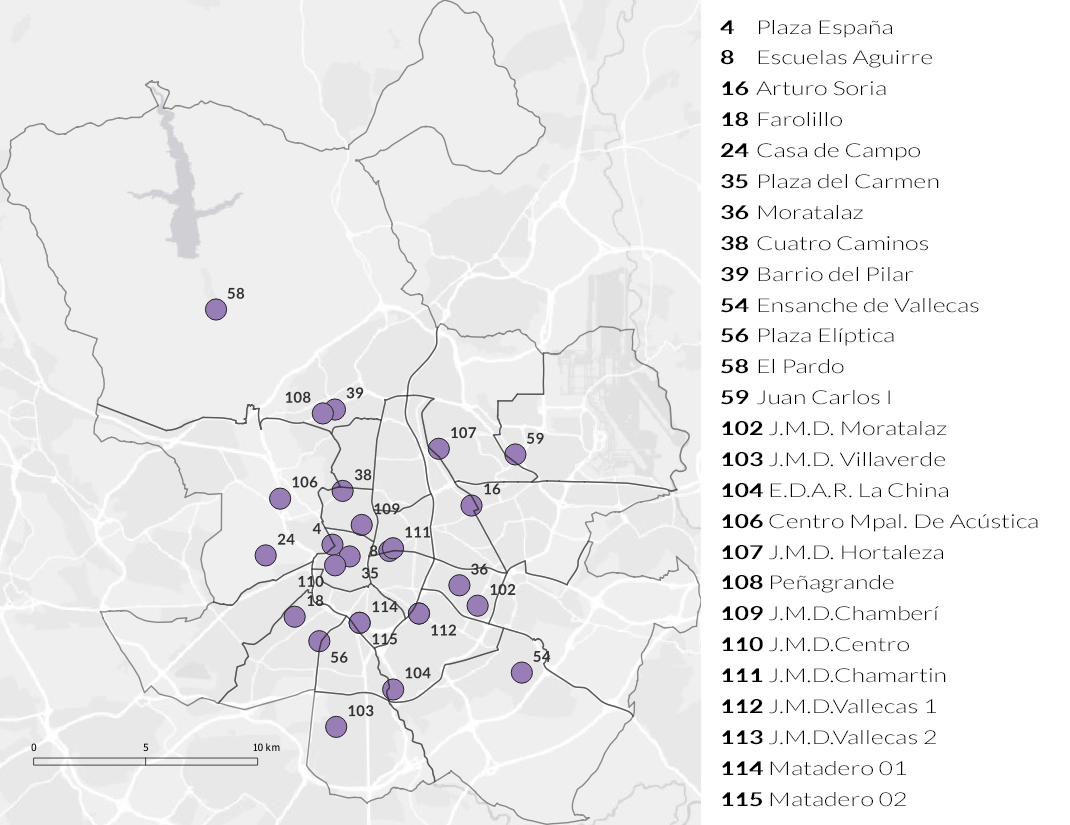
<style>
.page{position:relative;width:1070px;height:825px;background:#ffffff}
.page>*{position:absolute;margin:0}
.t1{font:19.3px/30.9px "Lato-Light";color:#000000;scale:1.29 1}
.t2{font:19.3px/30.9px "Lato-Bold";color:#000000;scale:1.29 1}
</style>
<div class="page">
<p class="t1" style="left:720px;top:20px;width:318px;height:787px"><span class="t2">4</span> Plaza España<br><span class="t2">8</span> Escuelas Aguirre<br><span class="t2">16</span> Arturo Soria<br><span class="t2">18</span> Farolillo<br><span class="t2">24</span> Casa de Campo<br><span class="t2">35</span> Plaza del Carmen<br><span class="t2">36</span> Moratalaz<br><span class="t2">38</span> Cuatro Caminos<br><span class="t2">39</span> Barrio del Pilar<br><span class="t2">54</span> Ensanche de Vallecas<br><span class="t2">56</span> Plaza Elíptica<br><span class="t2">58</span> El Pardo<br><span class="t2">59</span> Juan Carlos I<br><span class="t2">102</span> J.M.D. Moratalaz<br><span class="t2">103</span> J.M.D. Villaverde<br><span class="t2">104</span> E.D.A.R. La China<br><span class="t2">106</span> Centro Mpal. De Acústica<br><span class="t2">107</span> J.M.D. Hortaleza<br><span class="t2">108</span> Peñagrande<br><span class="t2">109</span> J.M.D.Chamberí<br><span class="t2">110</span> J.M.D.Centro<br><span class="t2">111</span> J.M.D.Chamartin<br><span class="t2">112</span> J.M.D.Vallecas 1<br><span class="t2">113</span> J.M.D.Vallecas 2<br><span class="t2">114</span> Matadero 01<br><span class="t2">115</span> Matadero 02</p>
</div>
